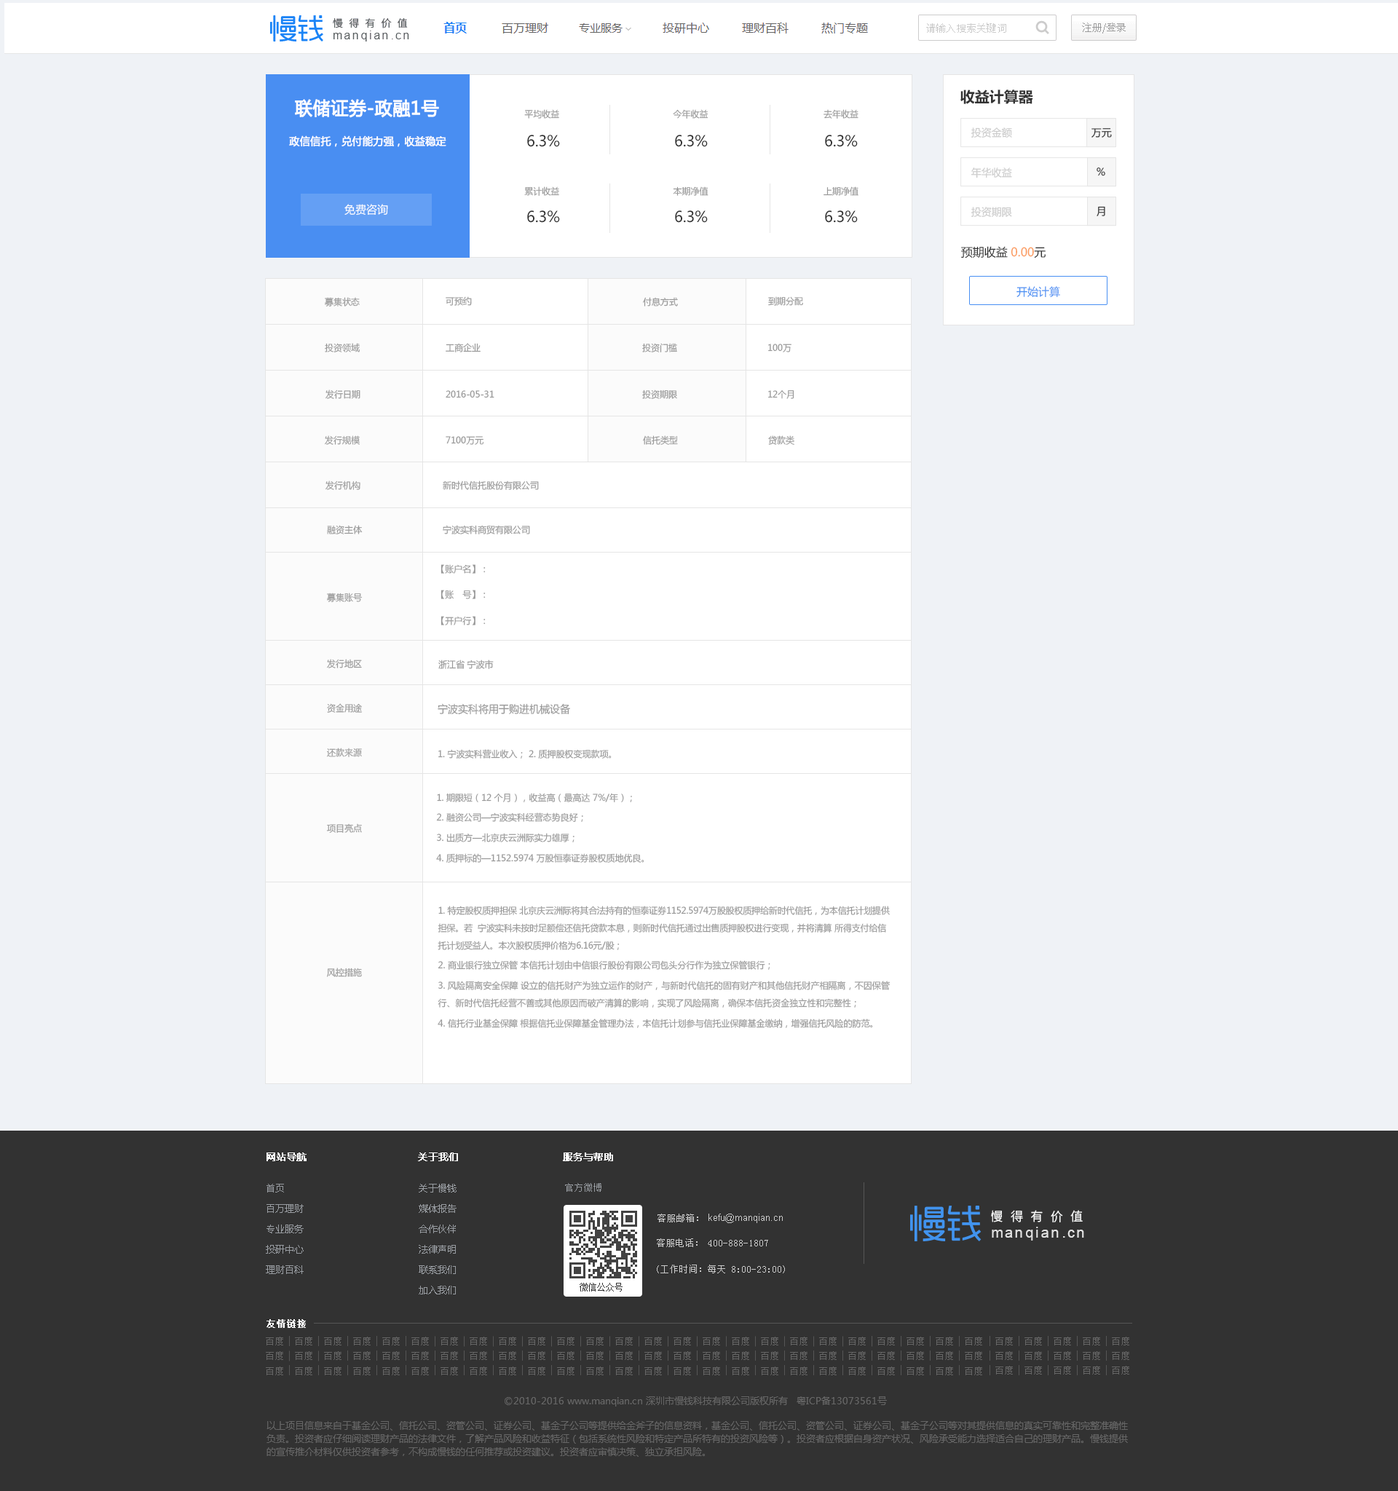
<style>
.page{position:relative;width:1398px;height:1491px;background:#eff2f6}
.page>*{position:absolute;margin:0}
.t1{font:14.6px "MicrosoftYaHei-Bold";color:#333333}
.t2{font:18px "MicrosoftYaHei";color:#ffffff;font-weight:bold}
.t3{font:9px "MicrosoftYaHei";color:#999999}
.t4{font:10.5px "MicrosoftYaHei";color:#ffffff;font-weight:bold}
.t5{font:15px "MicrosoftYaHei";color:#333333}
.t6{font:10.2px "MicrosoftYaHei";color:#cccccc}
.t7{font:10.2px "MicrosoftYaHei";color:#333333}
.t8{font:10.2px "MicrosoftYaHei"}
.t9{font:10.9px "MicrosoftYaHei";color:#ffffff}
.t10{font:11.7px "MicrosoftYaHei";color:#333333}
.t11{font:11.7px "MicrosoftYaHei";color:#fb9b5e}
.t12{font:10.9px "MicrosoftYaHei";color:#488ff3}
.t13{font:9px/23.3px "MicrosoftYaHei";color:#999999}
.t14{font:10.5px "MicrosoftYaHei";color:#999999}
.t15{font:9px/17.5px "MicrosoftYaHei";color:#999999}
</style>
<div class="page">
<p class="t1" style="left:960px;top:90px;width:73px;height:14px">收益计算器</p>
<p class="t2" style="left:295px;top:99px;width:144px;height:19px">联储证券-政融1号</p>
<p class="t3" style="left:524px;top:109px;width:35px;height:10px">平均收益</p>
<p class="t3" style="left:673px;top:109px;width:35px;height:10px">今年收益</p>
<p class="t3" style="left:824px;top:109px;width:34px;height:10px">去年收益</p>
<p class="t4" style="left:289px;top:135px;width:157px;height:12px">政信信托，兑付能力强，收益稳定</p>
<p class="t5" style="left:527px;top:135px;width:33px;height:12px">6.3%</p>
<p class="t5" style="left:675px;top:135px;width:33px;height:12px">6.3%</p>
<p class="t5" style="left:825px;top:135px;width:33px;height:12px">6.3%</p>
<p class="t6" style="left:971px;top:127px;width:41px;height:11px">投资金额</p>
<p class="t7" style="left:1092px;top:128px;width:20px;height:10px">万元</p>
<p class="t6" style="left:971px;top:167px;width:41px;height:11px">年华收益</p>
<p class="t8" style="left:1097px;top:167px;width:8px;height:9px">%</p>
<p class="t3" style="left:524px;top:186px;width:35px;height:10px">累计收益</p>
<p class="t3" style="left:673px;top:186px;width:35px;height:10px">本期净值</p>
<p class="t3" style="left:824px;top:186px;width:34px;height:10px">上期净值</p>
<p class="t9" style="left:344px;top:204px;width:44px;height:12px">免费咨询</p>
<p class="t6" style="left:971px;top:207px;width:41px;height:11px">投资期限</p>
<p class="t7" style="left:1097px;top:206px;width:8px;height:10px">月</p>
<p class="t5" style="left:527px;top:210px;width:33px;height:13px">6.3%</p>
<p class="t5" style="left:675px;top:210px;width:33px;height:13px">6.3%</p>
<p class="t5" style="left:825px;top:210px;width:33px;height:13px">6.3%</p>
<p class="t10" style="left:961px;top:246px;width:85px;height:12px">预期收益 <span class="t11">0.00</span>元</p>
<p class="t12" style="left:1017px;top:286px;width:43px;height:11px">开始计算</p>
<p class="t3" style="left:325px;top:297px;width:35px;height:10px">募集状态</p>
<p class="t3" style="left:446px;top:296px;width:26px;height:10px">可预约</p>
<p class="t3" style="left:643px;top:297px;width:35px;height:10px">付息方式</p>
<p class="t3" style="left:768px;top:296px;width:35px;height:10px">到期分配</p>
<p class="t3" style="left:325px;top:343px;width:35px;height:9px">投资领域</p>
<p class="t3" style="left:446px;top:343px;width:35px;height:9px">工商企业</p>
<p class="t3" style="left:642px;top:343px;width:35px;height:9px">投资门槛</p>
<p class="t3" style="left:768px;top:344px;width:24px;height:8px">100万</p>
<p class="t3" style="left:325px;top:390px;width:35px;height:9px">发行日期</p>
<p class="t3" style="left:642px;top:390px;width:35px;height:9px">投资期限</p>
<p class="t3" style="left:446px;top:390px;width:48px;height:8px">2016-05-31</p>
<p class="t3" style="left:768px;top:390px;width:26px;height:9px">12个月</p>
<p class="t3" style="left:325px;top:435px;width:35px;height:10px">发行规模</p>
<p class="t3" style="left:446px;top:436px;width:38px;height:9px">7100万元</p>
<p class="t3" style="left:643px;top:435px;width:35px;height:10px">信托类型</p>
<p class="t3" style="left:768px;top:435px;width:26px;height:10px">贷款类</p>
<p class="t3" style="left:325px;top:481px;width:35px;height:9px">发行机构</p>
<p class="t3" style="left:443px;top:481px;width:96px;height:9px">新时代信托股份有限公司</p>
<p class="t3" style="left:327px;top:525px;width:36px;height:9px">融资主体</p>
<p class="t3" style="left:443px;top:525px;width:87px;height:9px">宁波实科商贸有限公司</p>
<p class="t13" style="left:441px;top:564px;width:45px;height:61px">【账户名】：<br>【账　号】：<br>【开户行】：</p>
<p class="t3" style="left:327px;top:593px;width:36px;height:9px">募集账号</p>
<p class="t3" style="left:327px;top:659px;width:35px;height:9px">发行地区</p>
<p class="t3" style="left:438px;top:660px;width:56px;height:9px">浙江省 宁波市</p>
<p class="t3" style="left:327px;top:703px;width:36px;height:10px">资金用途</p>
<p class="t14" style="left:438px;top:703px;width:132px;height:12px">宁波实科将用于购进机械设备</p>
<p class="t3" style="left:327px;top:748px;width:35px;height:9px">还款来源</p>
<p class="t3" style="left:438px;top:749px;width:174px;height:10px">1. 宁波实科营业收入； 2. 质押股权变现款项。</p>
<p class="t15" style="left:436px;top:793px;width:208px;height:70px">1. 期限短（12 个月），收益高（最高达 7%/年）；<br>2. 融资公司—宁波实科经营态势良好；<br>3. 出质方—北京庆云洲际实力雄厚；<br>4. 质押标的—1152.5974 万股恒泰证券股权质地优良。</p>
<p class="t3" style="left:326px;top:824px;width:36px;height:9px">项目亮点</p>
<p class="t15" style="left:438px;top:906px;width:453px;height:122px">1. 特定股权质押担保 北京庆云洲际将其合法持有的恒泰证券1152.5974万股股权质押给新时代信托，为本信托计划提供担保。若  宁波实科未按时足额偿还信托贷款本息，则新时代信托通过出售质押股权进行变现，并将清算 所得支付给信托计划受益人。本次股权质押价格为6.16元/股；<br>2. 商业银行独立保管 本信托计划由中信银行股份有限公司包头分行作为独立保管银行；<br>3. 风险隔离安全保障 设立的信托财产为独立运作的财产，与新时代信托的固有财产和其他信托财产相隔离，不因保管行、新时代信托经营不善或其他原因而破产清算的影响，实现了风险隔离，确保本信托资金独立性和完整性；<br>4. 信托行业基金保障 根据信托业保障基金管理办法，本信托计划参与信托业保障基金缴纳，增强信托风险的防范。</p>
<p class="t3" style="left:327px;top:968px;width:35px;height:9px">风控措施</p>
</div>
